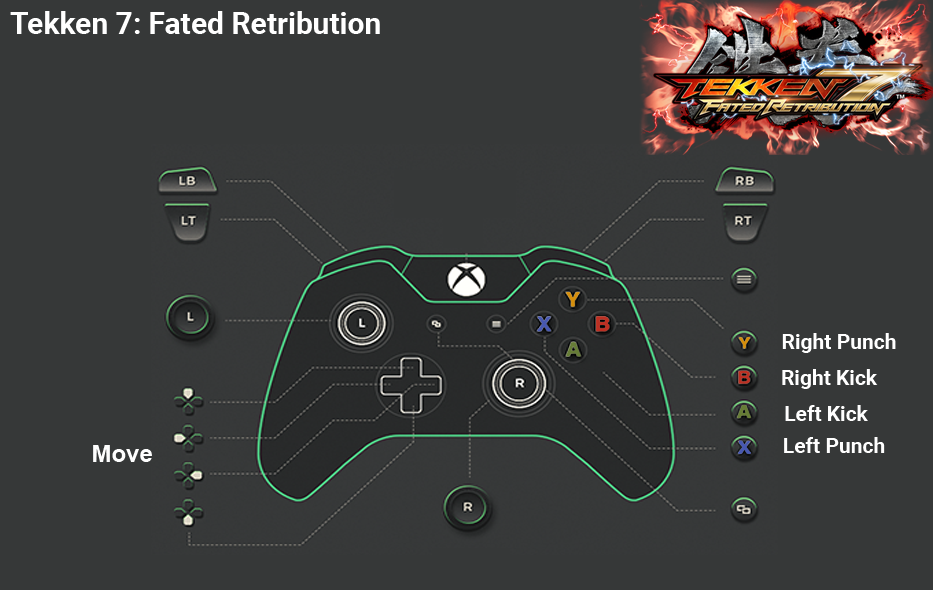
<style>
.page{position:relative;width:933px;height:590px;background:#363838}
.page>*{position:absolute;margin:0}
.t1{font:30px "Roboto-Bold";color:#ffffff}
.t2{font:21px "Roboto-Bold";color:#ffffff}
.t3{font:24px "Arial-BoldMT";color:#fefefe}
</style>
<div class="page">
<p class="t1" style="left:10px;top:11px;width:370px;height:23px">Tekken 7: Fated Retribution</p>
<p class="t2" style="left:782px;top:333px;width:114px;height:20px">Right Punch</p>
<p class="t2" style="left:782px;top:369px;width:96px;height:20px">Right Kick</p>
<p class="t2" style="left:785px;top:405px;width:83px;height:16px">Left Kick</p>
<p class="t2" style="left:784px;top:437px;width:101px;height:16px">Left Punch</p>
<p class="t3" style="left:93px;top:445px;width:59px;height:17px">Move</p>
</div>
